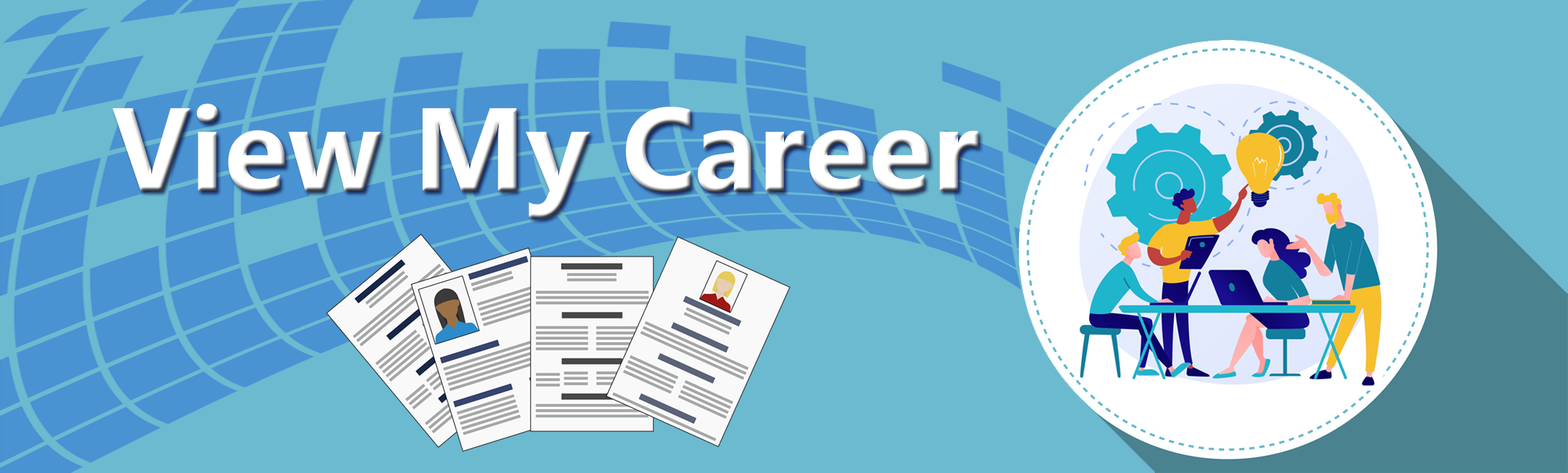
<style>
.page{position:relative;width:1568px;height:473px;background:#6cbad0}
.page>*{position:absolute;margin:0}
.t1{font:117.6px "Ebrima-Bold";color:#ffffff}
</style>
<div class="page">
<p class="t1" style="left:112px;top:103px;width:866px;height:116px">View My Career</p>
</div>
